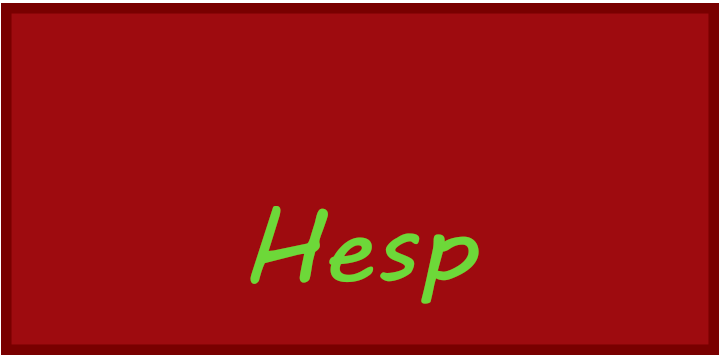
<style>
.page{position:relative;width:720px;height:360px;background:#9e0b0f}
.page>*{position:absolute;margin:0}
.t1{font:100px "MVBoli";color:#6dd839;scale:1.06 1}
</style>
<div class="page">
<p class="t1" style="left:250px;top:206px;width:229px;height:98px">Hesp</p>
</div>
